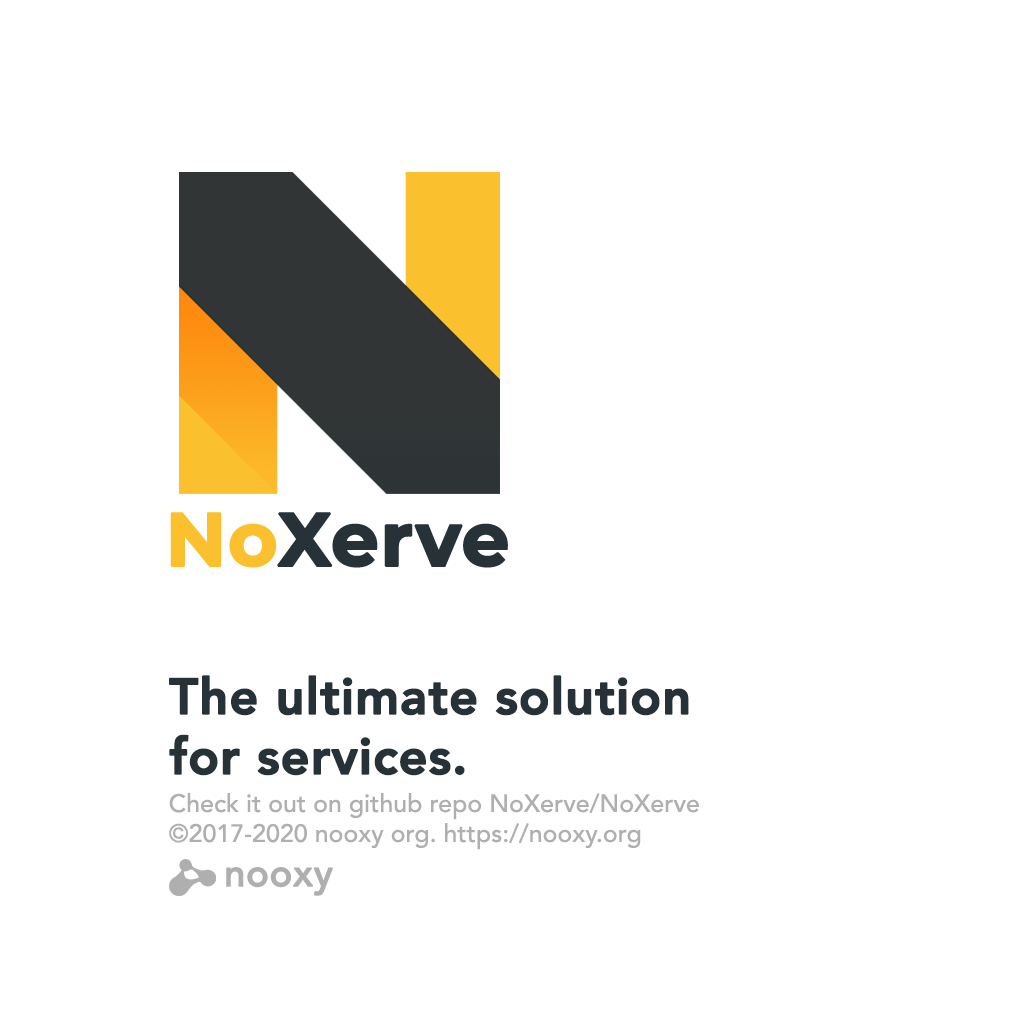
<style>
.page{position:relative;width:1024px;height:1024px;background:#ffffff}
.page>*{position:absolute;margin:0}
.t1{font:50px "Avenir-Heavy";color:#263238;font-weight:bold}
.t2{font:25px "Avenir-Medium";color:#afafaf}
.t3{font:37.8px "Avenir-Medium";color:#afafaf;font-weight:bold}
</style>
<div class="page">
<p class="t1" style="left:169px;top:675px;width:520px;height:101px">The ultimate solution <br>for services.</p>
<p class="t2" style="left:169px;top:793px;width:530px;height:57px">Check it out on github repo NoXerve/NoXerve<br>©2017-2020 nooxy org. https://nooxy.org</p>
<p class="t3" style="left:226px;top:867px;width:107px;height:29px">nooxy</p>
</div>
